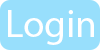
<style>
.page{position:relative;width:100px;height:50px;background:#98dffc}
.page>*{position:absolute;margin:0}
.t1{font:39px "MyriadPro-Regular";color:#ffffff}
</style>
<div class="page">
<p class="t1" style="left:8px;top:10px;width:86px;height:35px">Login</p>
</div>
